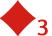
<style>
.page{position:relative;width:52px;height:36px;background:#ffffff}
.page>*{position:absolute;margin:0}
.t1{font:23.4px "MyriadPro-Regular";letter-spacing:-0.1em;color:#d22018;font-weight:bold}
</style>
<div class="page">
<p class="t1" style="left:37px;top:19px;width:11px;height:17px">3</p>
</div>
